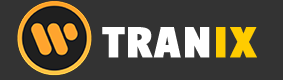
<style>
.page{position:relative;width:283px;height:80px;background:#333333}
.page>*{position:absolute;margin:0}
.t1{font:41.5px "FengardoNeue-Black";letter-spacing:0.057em;color:#ffffff;text-transform:uppercase;font-weight:bold}
.t2{font:41.5px "FengardoNeue-Black";letter-spacing:0.057em;color:#ffcc00;text-transform:uppercase;font-weight:bold}
</style>
<div class="page">
<p class="t1" style="left:102px;top:27px;width:155px;height:31px">Tran<span class="t2">ix</span></p>
</div>
